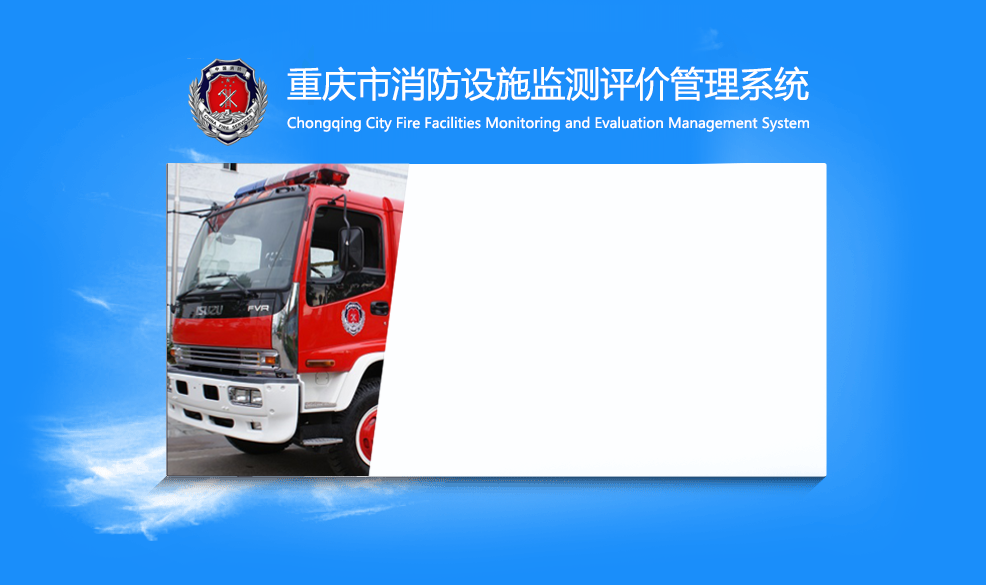
<style>
.page{position:relative;width:986px;height:585px;background:#fdfeff}
.page>*{position:absolute;margin:0}
.t1{font:35px "MicrosoftYaHei";color:#ffffff}
.t2{font:14px "MicrosoftYaHei";color:#ffffff}
</style>
<div class="page">
<p class="t1" style="left:287px;top:66px;width:522px;height:35px">重庆市消防设施监测评价管理系统</p>
<p class="t2" style="left:287px;top:116px;width:522px;height:16px">Chongqing City Fire Facilities Monitoring and Evaluation Management System</p>
</div>
